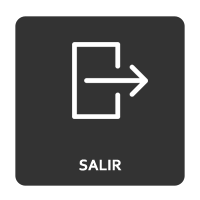
<style>
.page{position:relative;width:200px;height:200px;background:#333333}
.page>*{position:absolute;margin:0}
.t1{font:16px "Corbel-Bold";color:#ffffff}
</style>
<div class="page">
<p class="t1" style="left:79px;top:159px;width:43px;height:12px">SALIR</p>
</div>
